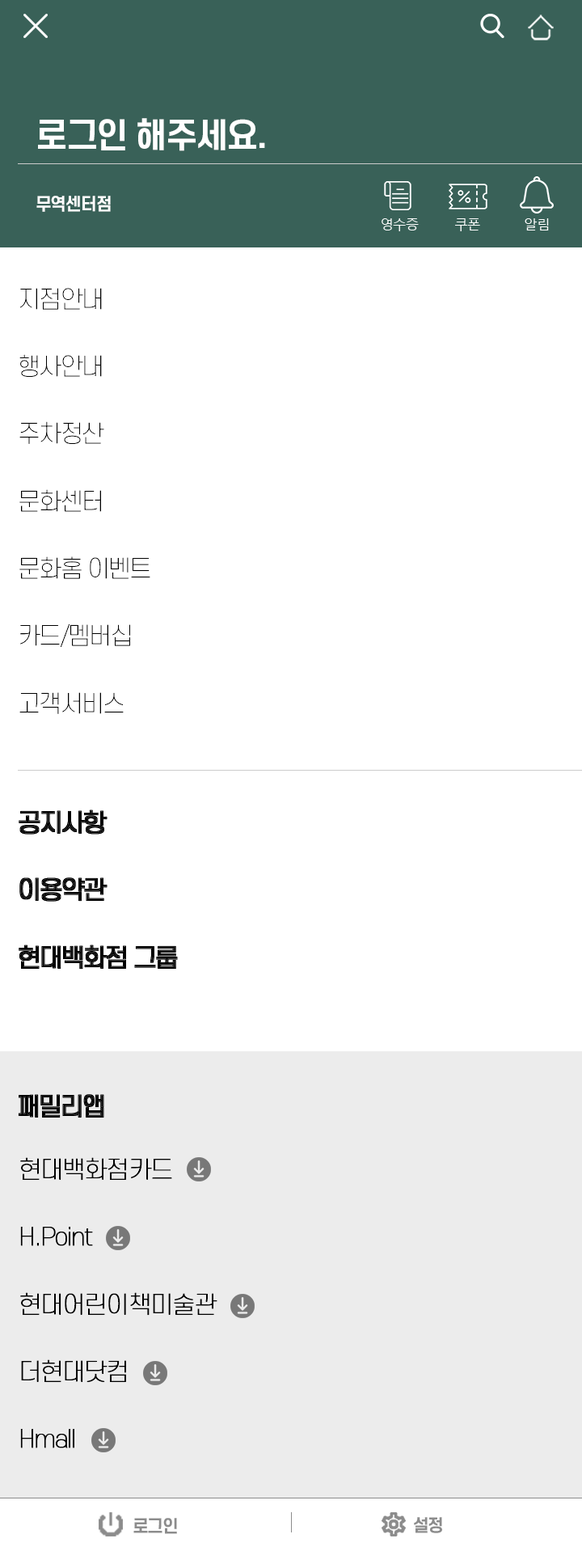
<style>
.page{position:relative;width:582px;height:1568px;background:#ffffff}
.page>*{position:absolute;margin:0}
.t1{font:33.7px "S-CoreDream-6Bold";letter-spacing:-0.055em;color:#ffffff}
.t2{font:16.8px "S-CoreDream-6Bold";letter-spacing:-0.055em;color:#ffffff}
.t3{font:23.6px/67.4px "S-CoreDream-1Thin";letter-spacing:-0.055em;color:#000000}
.t4{font:23.6px/67.4px "S-CoreDream-1Thin";letter-spacing:-0.055em;color:#000000;font-weight:bold}
</style>
<div class="page">
<p class="t1" style="left:38px;top:118px;width:227px;height:33px">로그인 해주세요.</p>
<p class="t2" style="left:36px;top:196px;width:75px;height:16px">무역센터점</p>
<p class="t3" style="left:19px;top:288px;width:131px;height:426px">지점안내<br>행사안내<br>주차정산<br>문화센터<br>문화홈 이벤트<br>카드/멤버십<br>고객서비스</p>
<p class="t4" style="left:20px;top:1157px;width:198px;height:291px">현대백화점카드<br>H.Point<br>현대어린이책미술관<br>더현대닷컴<br>Hmall</p>
</div>
